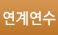
<style>
.page{position:relative;width:58px;height:35px}
.page>*{position:absolute;margin:0}
.t1{font:15px "NanumGothicBold";color:#ffffff;scale:0.95 1}
</style>
<div class="page">
<p class="t1" style="left:3px;top:11px;width:53px;height:15px">연계연수</p>
</div>
